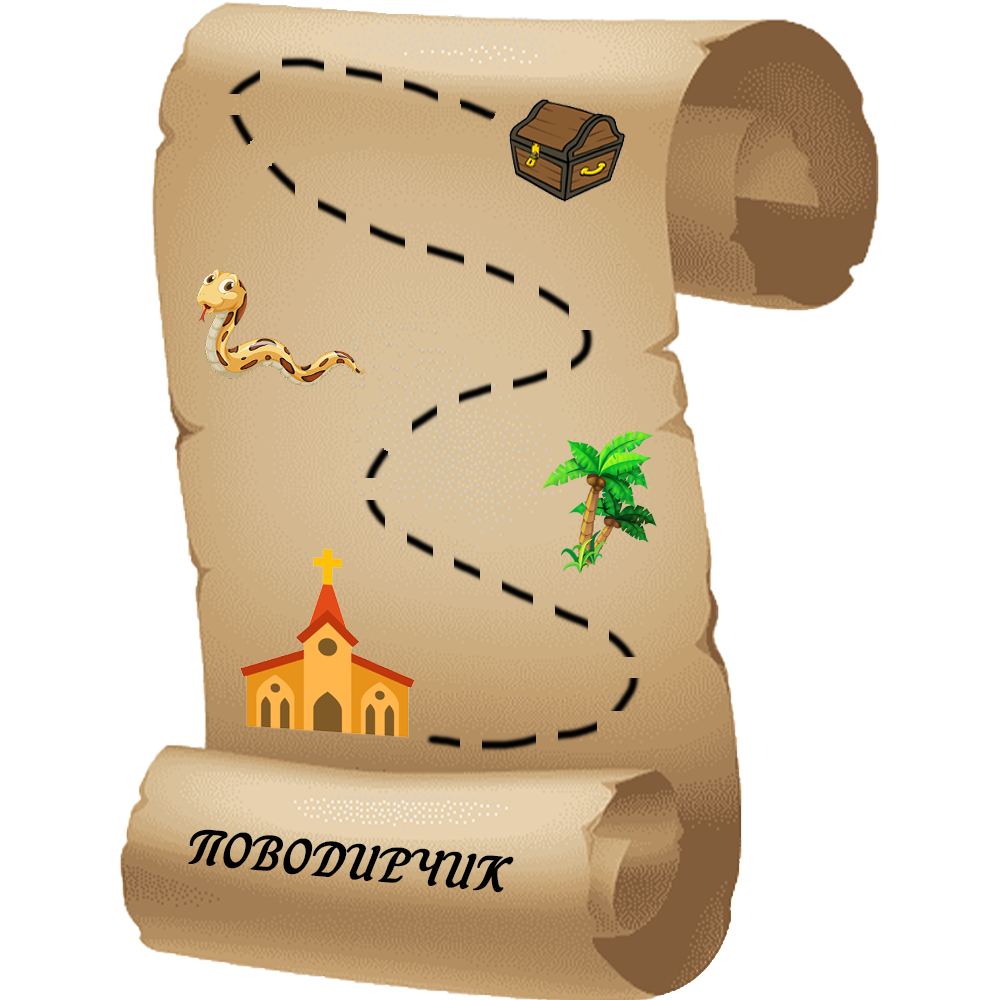
<style>
.page{position:relative;width:1000px;height:1000px;background:#ffffff}
.page>*{position:absolute;margin:0}
.t1{font:50px "BehrensKursivC";color:#000000;text-transform:uppercase;font-weight:bold}
</style>
<div class="page">
<p class="t1" style="left:188px;top:829px;width:326px;height:64px;rotate:5deg">Поводирчик</p>
</div>
